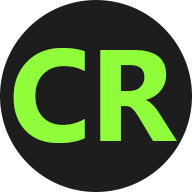
<style>
.page{position:relative;width:192px;height:192px;background:#1d1d1d}
.page>*{position:absolute;margin:0}
.t1{font:130px "SegoeUI-Bold";color:#91fe3c}
</style>
<div class="page">
<p class="t1" style="left:13px;top:48px;width:164px;height:95px">CR</p>
</div>
